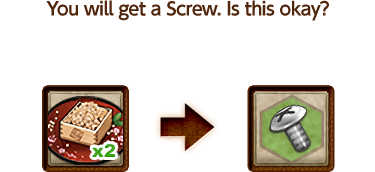
<style>
.page{position:relative;width:375px;height:172px;background:#ffffff}
.page>*{position:absolute;margin:0}
.t1{font:18px "UDShinGoPro-DeBold";letter-spacing:-0.04em;color:#50260d}
</style>
<div class="page">
<p class="t1" style="left:46px;top:0px;width:283px;height:21px">You will get a Screw. Is this okay?</p>
</div>
